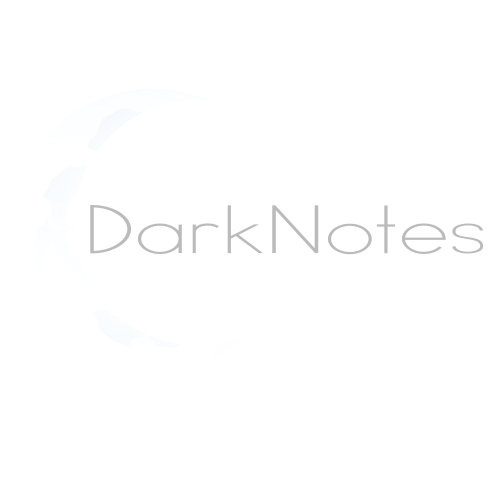
<style>
.page{position:relative;width:500px;height:500px;background:#ffffff}
.page>*{position:absolute;margin:0}
.t1{font:79.4px "Minimal-Regular";color:#bbbbbb;scale:1.43 1}
</style>
<div class="page">
<p class="t1" style="left:90px;top:205px;width:394px;height:50px">DarkNotes</p>
</div>
